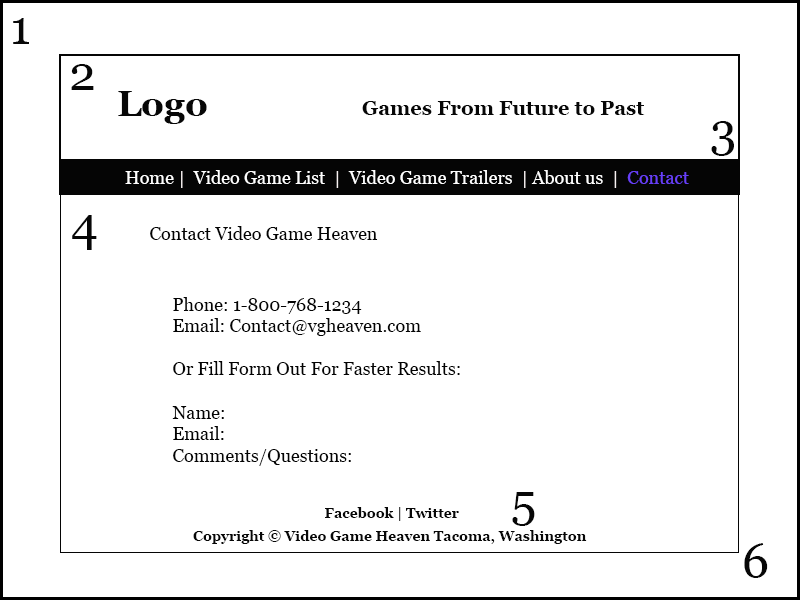
<style>
.page{position:relative;width:800px;height:600px;background:#ffffff}
.page>*{position:absolute;margin:0}
.t1{font:48px "Georgia";color:#070707}
.t2{font:36px "Georgia-Bold";color:#070707}
.t3{font:20px "Georgia-Bold";color:#070707}
.t4{font:18px "Georgia";color:#ffffff}
.t5{font:18px "Georgia";color:#f8f2f2}
.t6{font:18px "Georgia";color:#673ff8}
.t7{font:18px "Georgia";color:#030303}
.t8{font:14px "Georgia-Bold";color:#070707}
</style>
<div class="page">
<p class="t1" style="left:13px;top:18px;width:16px;height:26px">1</p>
<p class="t1" style="left:71px;top:64px;width:23px;height:26px">2</p>
<p class="t2" style="left:118px;top:91px;width:89px;height:33px">Logo</p>
<p class="t3" style="left:362px;top:101px;width:283px;height:14px">Games From Future to Past</p>
<p class="t1" style="left:711px;top:121px;width:23px;height:35px">3</p>
<p class="t4" style="left:125px;top:170px;width:564px;height:18px">Home<span class="t5"> |  </span>Video Game List<span class="t5">  |  </span>Video Game Trailers<span class="t5">  | </span>About us <span class="t5"> |  </span><span class="t6">Contact</span></p>
<p class="t1" style="left:72px;top:215px;width:25px;height:35px">4</p>
<p class="t7" style="left:150px;top:226px;width:228px;height:14px">Contact Video Game Heaven</p>
<p class="t7" style="left:172px;top:297px;width:288px;height:169px">Phone: 1-800-768-1234<br>Email: Contact@vgheaven.com<br><br>Or Fill Form Out For Faster Results:<br><br>Name:<br>Email:<br>Comments/Questions:</p>
<p class="t1" style="left:512px;top:492px;width:23px;height:34px">5</p>
<p class="t8" style="left:325px;top:507px;width:134px;height:14px">Facebook | Twitter</p>
<p class="t8" style="left:193px;top:530px;width:394px;height:14px">Copyright © Video Game Heaven Tacoma, Washington</p>
<p class="t1" style="left:744px;top:543px;width:24px;height:35px">6</p>
</div>
